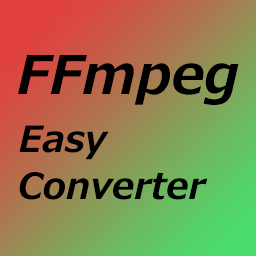
<style>
.page{position:relative;width:256px;height:256px}
.page>*{position:absolute;margin:0}
.t1{font:53px "Meiryo-BoldItalic";color:#000000}
.t2{font:36px "Meiryo-BoldItalic";color:#000000}
</style>
<div class="page">
<p class="t1" style="left:18px;top:55px;width:221px;height:50px">FFmpeg</p>
<p class="t2" style="left:19px;top:125px;width:90px;height:35px">Easy</p>
<p class="t2" style="left:19px;top:172px;width:189px;height:28px">Converter</p>
</div>
